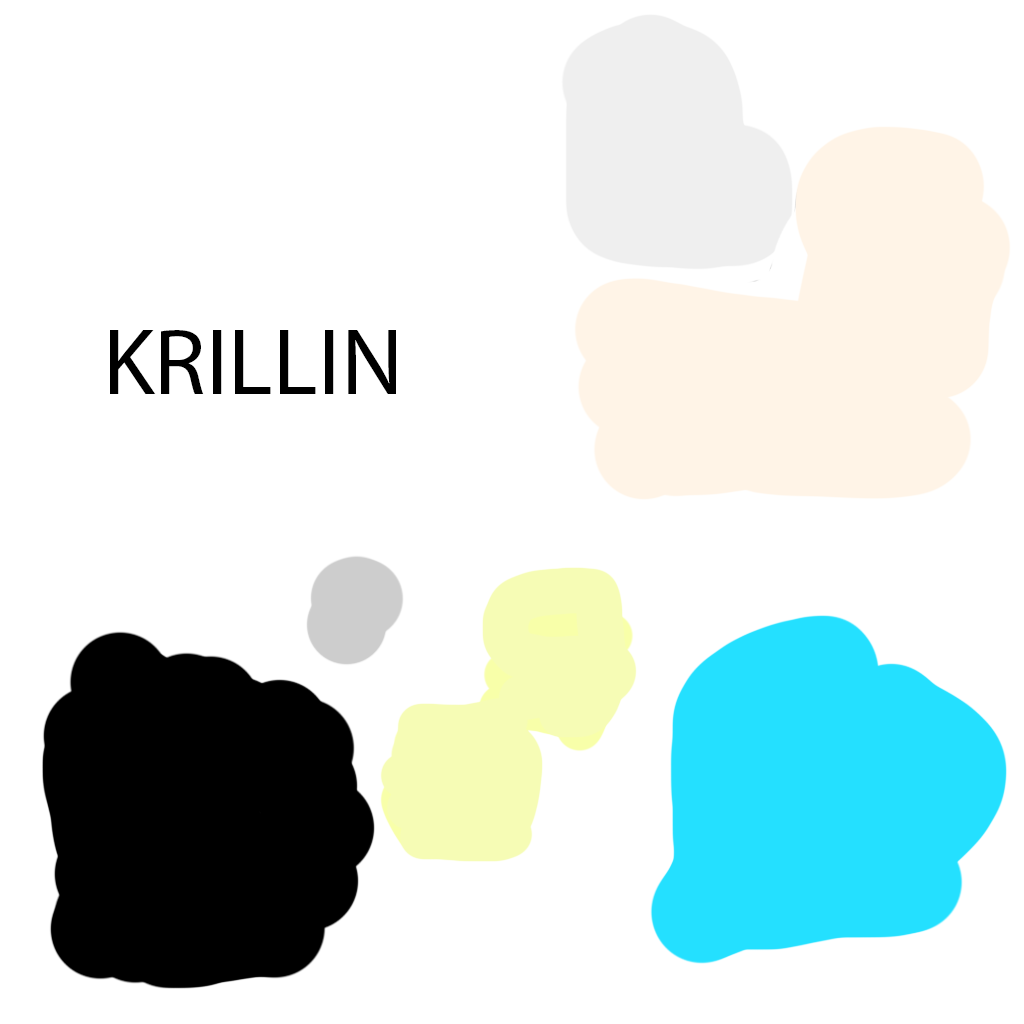
<style>
.page{position:relative;width:1024px;height:1024px;background:#ffffff}
.page>*{position:absolute;margin:0}
.t1{font:95px "MyriadPro-Regular";color:#000000}
</style>
<div class="page">
<p class="t1" style="left:110px;top:330px;width:286px;height:64px">KRILLIN</p>
</div>
